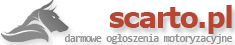
<style>
.page{position:relative;width:235px;height:45px;background:#ffffff}
.page>*{position:absolute;margin:0}
.t1{font:30px "Tahoma-Bold";letter-spacing:-0.025em;color:#b44735}
.t2{font:11px "Consolas-Bold";letter-spacing:-0.075em;color:#949494}
</style>
<div class="page">
<p class="t1" style="left:109px;top:5px;width:123px;height:29px">scarto.pl</p>
<p class="t2" style="left:64px;top:34px;width:169px;height:10px">darmowe ogłoszenia motoryzacyjne</p>
</div>
